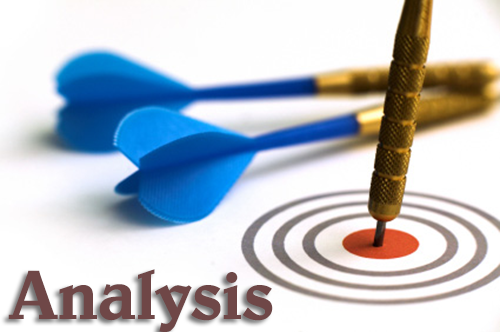
<style>
.page{position:relative;width:500px;height:332px}
.page>*{position:absolute;margin:0}
.t1{font:72px "Belwe-Bold";color:#6f4747}
</style>
<div class="page">
<p class="t1" style="left:8px;top:269px;width:265px;height:63px">Analysis</p>
</div>
